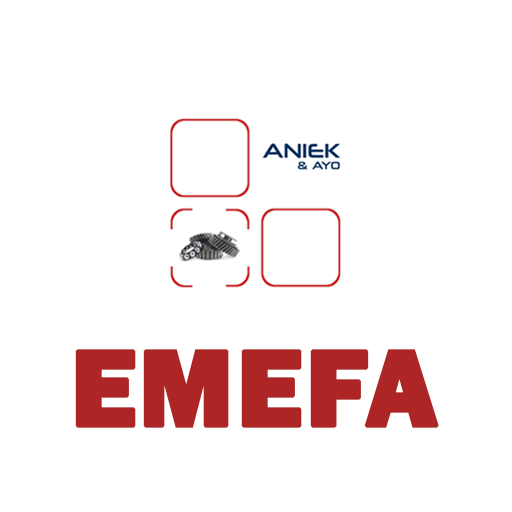
<style>
.page{position:relative;width:512px;height:512px;background:#ffffff}
.page>*{position:absolute;margin:0}
.t1{font:112.4px "FranklinGothic-Heavy";color:#ae2525;text-transform:uppercase;font-weight:bold}
</style>
<div class="page">
<p class="t1" style="left:75px;top:349px;width:364px;height:79px">Emefa</p>
</div>
